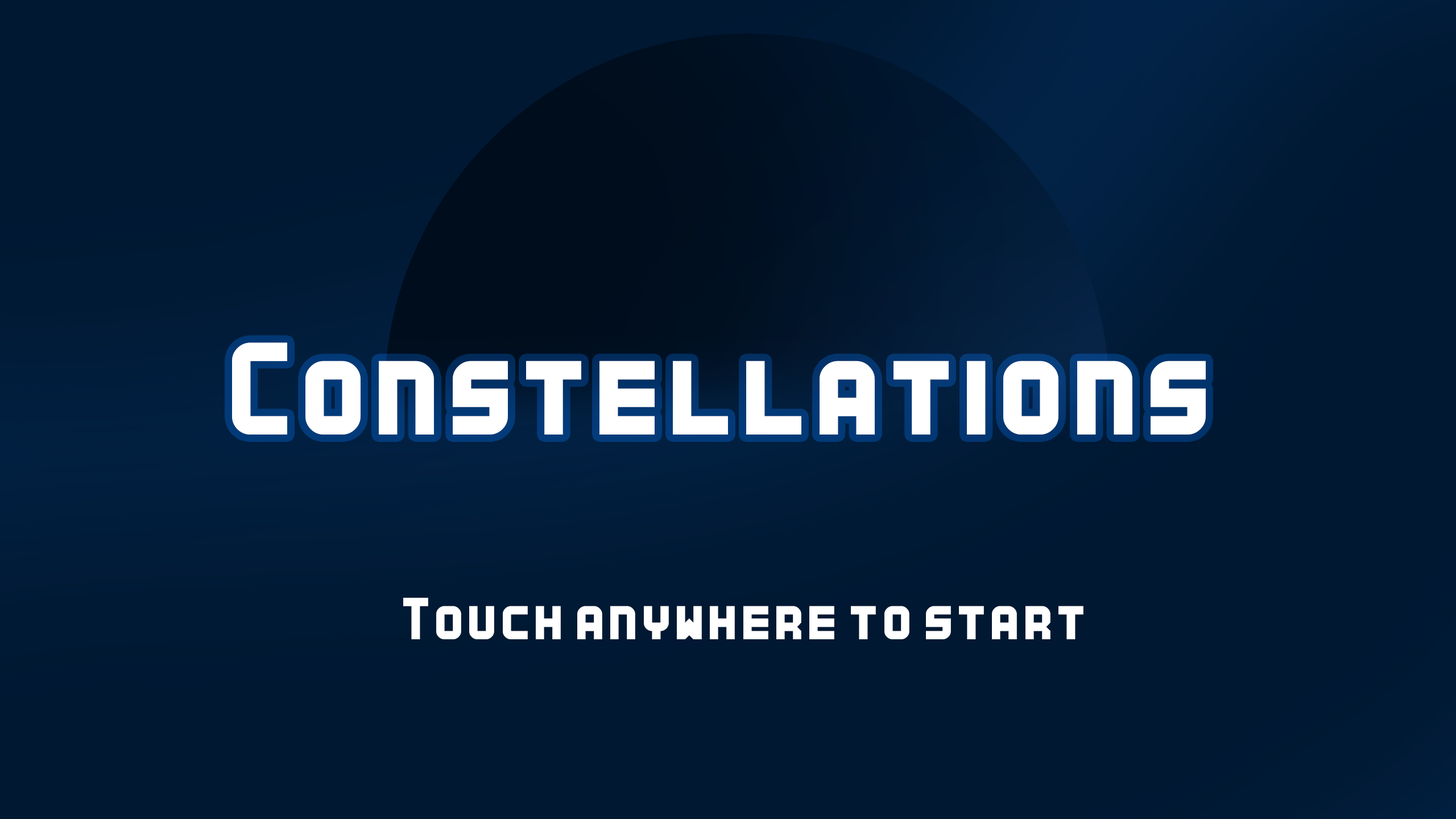
<style>
.page{position:relative;width:1456px;height:819px;background:#001832}
.page>*{position:absolute;margin:0}
.t1{font:73.5px "KenVector-Bold";color:#ffffff}
.t2{font:33.2px "KenVector-Bold";color:#ffffff}
</style>
<div class="page">
<p class="t1" style="left:232px;top:342px;width:974px;height:93px">Constellations</p>
<p class="t2" style="left:403px;top:598px;width:680px;height:41px">Touch anywhere to start</p>
</div>
